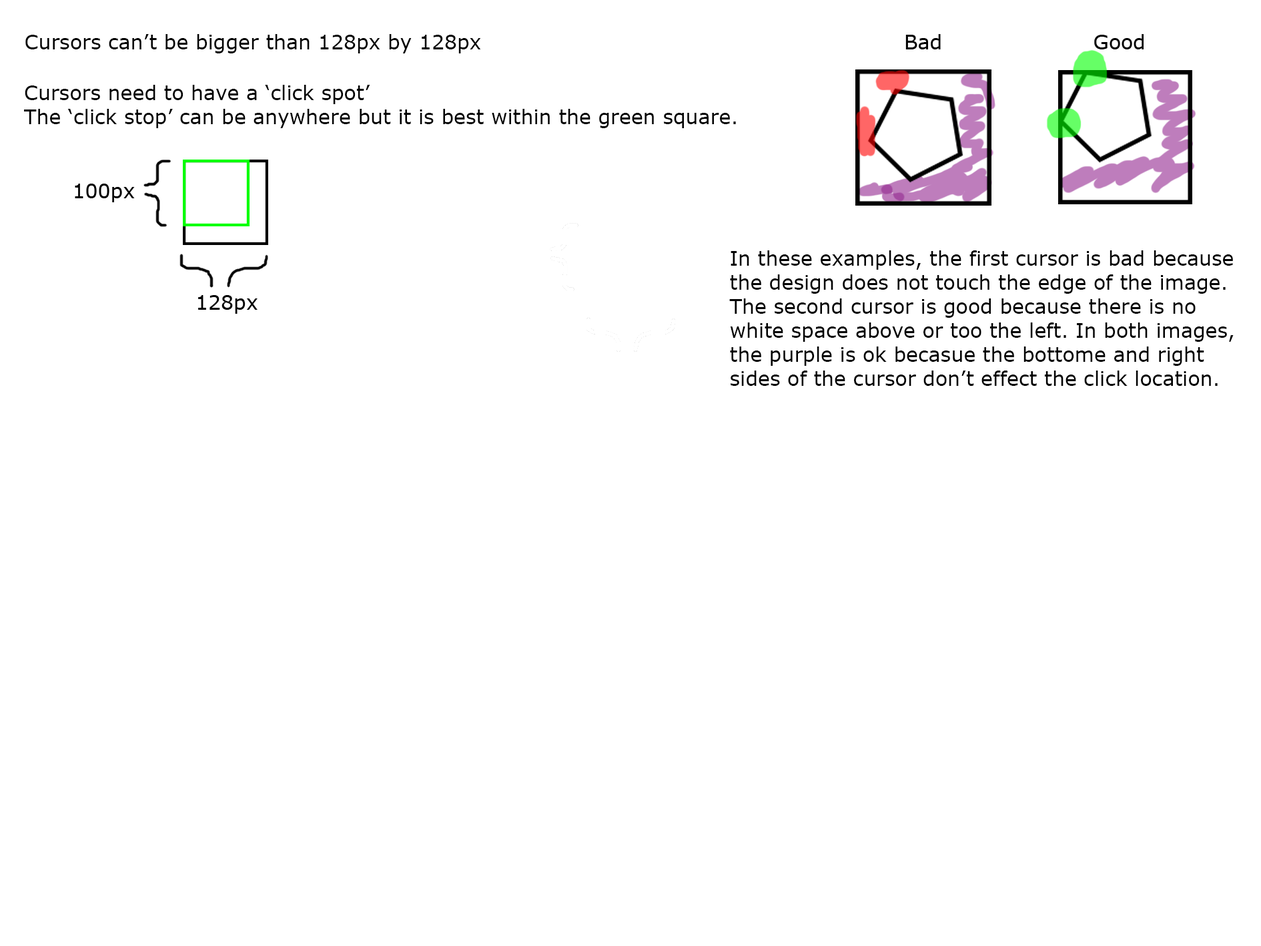
<style>
.page{position:relative;width:1261px;height:946px;background:#ffffff}
.page>*{position:absolute;margin:0}
.t1{font:20px "Verdana";color:#000000}
</style>
<div class="page">
<p class="t1" style="left:25px;top:34px;width:456px;height:19px">Cursors can’t be bigger than 128px by 128px</p>
<p class="t1" style="left:24px;top:85px;width:712px;height:43px">Cursors need to have a ‘click spot’<br>The ‘click stop’ can be anywhere but it is best within the green square.</p>
<p class="t1" style="left:729px;top:250px;width:505px;height:136px">In these examples, the first cursor is bad because <br>the design does not touch the edge of the image. <br>The second cursor is good because there is no <br>white space above or too the left. In both images, <br>the purple is ok becasue the bottome and right <br>sides of the cursor don’t effect the click location.</p>
</div>
